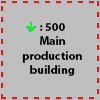
<style>
.page{position:relative;width:100px;height:100px;background:#bfbfbf}
.page>*{position:absolute;margin:0}
.t1{font:12px "MyriadPro-Bold";color:#000000}
</style>
<div class="page">
<p class="t1" style="left:22px;top:23px;width:60px;height:53px;text-align:center">: 500<br>Main<br>production building</p>
</div>
